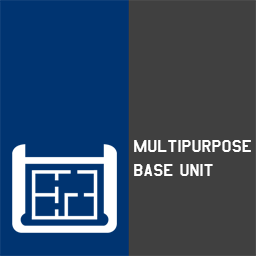
<style>
.page{position:relative;width:256px;height:256px;background:#404040}
.page>*{position:absolute;margin:0}
.t1{font:20.1px "AmarilloUSAF";color:#ffffff}
</style>
<div class="page">
<p class="t1" style="left:134px;top:140px;width:117px;height:36px">multipurpose<br>base unit</p>
</div>
